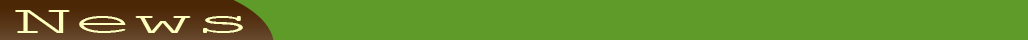
<style>
.page{position:relative;width:1028px;height:40px;background:#5e9b29}
.page>*{position:absolute;margin:0}
.t1{font:40px "CourierNewPSMT";color:#ffffbe;scale:2.5 1}
</style>
<div class="page">
<p class="t1" style="left:15px;top:10px;width:228px;height:23px">News</p>
</div>
